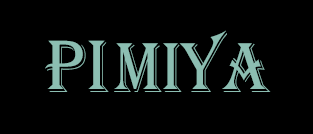
<style>
.page{position:relative;width:313px;height:134px;background:#000000}
.page>*{position:absolute;margin:0}
.t1{font:73px "Algerian";color:#8cbeb2;scale:0.87 1}
.t2{font:76.9px "Algerian";color:#8cbeb2;scale:0.91 1}
</style>
<div class="page">
<p class="t1" style="left:114px;top:30px;width:157px;height:62px">miya</p>
<p class="t2" style="left:45px;top:40px;width:64px;height:52px">PI</p>
</div>
